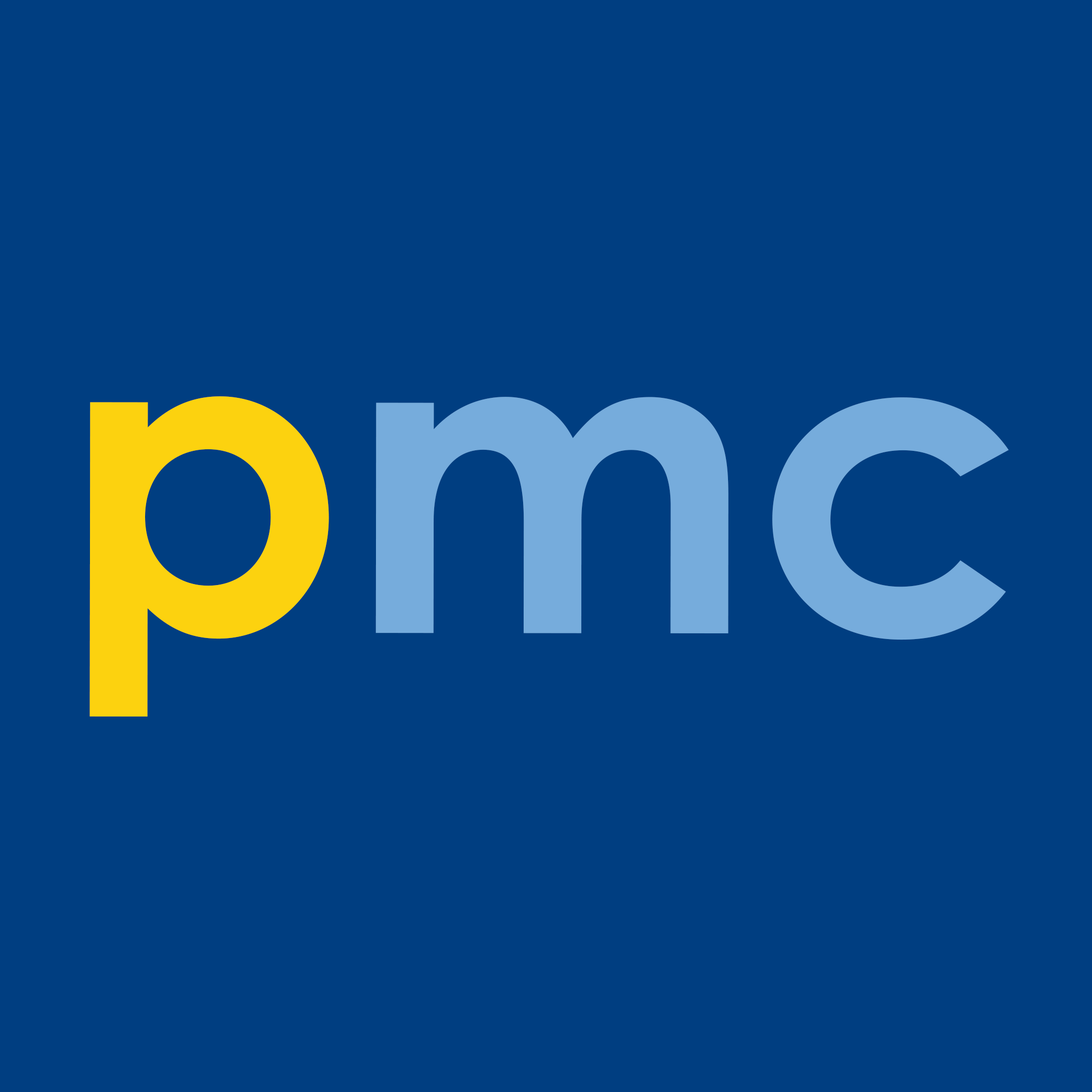
<style>
.page{position:relative;width:1092px;height:1092px;background:#003e81}
.page>*{position:absolute;margin:0}
.t1{font:433.3px "CenturyGothicPro-Bold";color:#76acdc}
.t2{font:433.3px "CenturyGothicPro-Bold";color:#fcd20f}
</style>
<div class="page">
<p class="t1" style="left:89px;top:396px;width:920px;height:321px"><span class="t2">p</span>mc</p>
</div>
